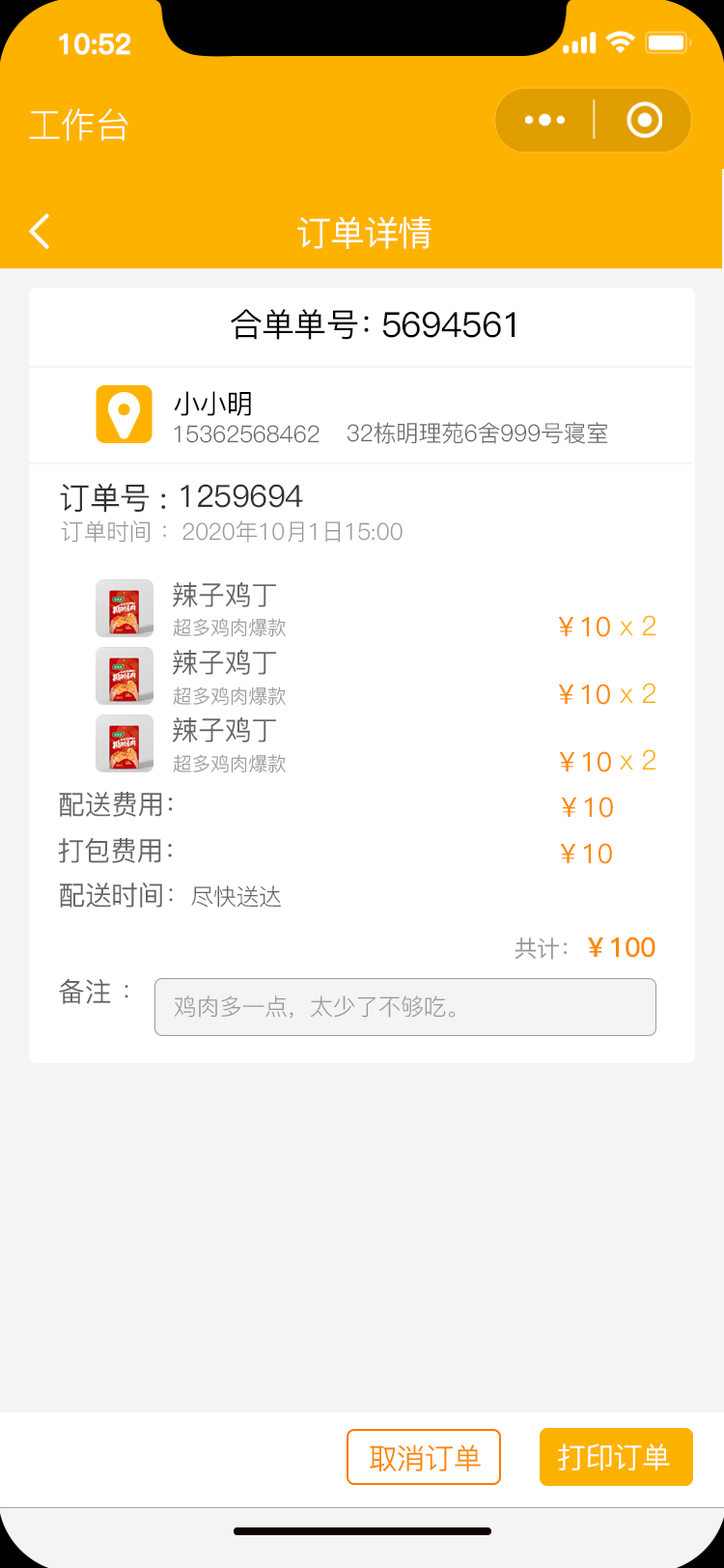
<style>
.page{position:relative;width:724px;height:1568px;background:#ffffff}
.page>*{position:absolute;margin:0}
.t1{font:27.5px "PingFang-SC-Bold";letter-spacing:-0.02em;color:#ffffff;font-weight:bold}
.t2{font:34.8px "PingFang-SC-Regular";letter-spacing:-0.02em;color:#ffffff}
.t3{font:34.8px "PingFang-SC-Medium";letter-spacing:-0.02em;color:#fefefe}
.t4{font:32.8px "PingFang-SC-Medium";letter-spacing:-0.02em;color:#000000}
.t5{font:34.8px "PingFang-SC-Medium";letter-spacing:-0.02em;color:#000000}
.t6{font:27px "PingFang-SC-Medium";letter-spacing:-0.02em;color:#000000}
.t7{font:23.2px "PingFang-SC-Regular";letter-spacing:-0.02em;color:#666666}
.t8{font:30.9px "PingFang-SC-Medium";letter-spacing:-0.02em;color:#333333}
.t9{font:23.2px "PingFang-SC-Regular";letter-spacing:-0.02em;color:#999999}
.t10{font:27px "PingFang-SC-Medium";letter-spacing:-0.02em;color:#666666}
.t11{font:19.3px "PingFang-SC-Regular";letter-spacing:-0.02em;color:#999999}
.t12{font:27px "PingFang-SC-Medium";letter-spacing:-0.02em;color:#fd8900}
.t13{font:27px "PingFang-SC-Regular";letter-spacing:-0.02em;color:#fdb100}
.t14{font:27px "PingFang-SC-Regular";letter-spacing:-0.02em;color:#666666}
.t15{font:27px "PingFang-SC-Bold";letter-spacing:-0.02em;color:#fd8900}
.t16{font:23.2px "PingFang-SC-Medium";letter-spacing:-0.02em;color:#999999}
.t17{font:29px "PingFang-SC-Medium";letter-spacing:-0.02em;color:#fd8900}
.t18{font:29px "PingFang-SC-Medium";letter-spacing:-0.02em;color:#ffffff}
</style>
<div class="page">
<p class="t1" style="left:59px;top:33px;width:71px;height:22px">10:52</p>
<p class="t2" style="left:29px;top:108px;width:99px;height:33px">工作台</p>
<p class="t3" style="left:297px;top:216px;width:135px;height:33px">订单详情</p>
<p class="t4" style="left:231px;top:309px;width:138px;height:31px">合单单号：</p>
<p class="t5" style="left:382px;top:311px;width:133px;height:27px">5694561</p>
<p class="t6" style="left:174px;top:391px;width:77px;height:25px">小小明</p>
<p class="t7" style="left:174px;top:425px;width:146px;height:18px">15362568462</p>
<p class="t7" style="left:347px;top:422px;width:261px;height:22px">32栋明理苑6舍999号寝室</p>
<p class="t8" style="left:60px;top:483px;width:106px;height:30px">订单号 :</p>
<p class="t8" style="left:181px;top:484px;width:122px;height:24px">1259694</p>
<p class="t9" style="left:61px;top:520px;width:342px;height:23px">订单时间 ：2020年10月1日15:00</p>
<p class="t10" style="left:173px;top:582px;width:103px;height:25px">辣子鸡丁</p>
<p class="t11" style="left:173px;top:618px;width:113px;height:19px">超多鸡肉爆款</p>
<p class="t12" style="left:558px;top:616px;width:52px;height:21px">￥10</p>
<p class="t13" style="left:620px;top:615px;width:37px;height:21px">x 2</p>
<p class="t10" style="left:173px;top:650px;width:103px;height:25px">辣子鸡丁</p>
<p class="t11" style="left:173px;top:686px;width:113px;height:20px">超多鸡肉爆款</p>
<p class="t12" style="left:558px;top:684px;width:52px;height:21px">￥10</p>
<p class="t13" style="left:620px;top:683px;width:37px;height:21px">x 2</p>
<p class="t10" style="left:173px;top:717px;width:103px;height:25px">辣子鸡丁</p>
<p class="t13" style="left:620px;top:749px;width:37px;height:21px">x 2</p>
<p class="t11" style="left:173px;top:754px;width:113px;height:19px">超多鸡肉爆款</p>
<p class="t12" style="left:559px;top:751px;width:52px;height:21px">￥10</p>
<p class="t10" style="left:59px;top:792px;width:114px;height:25px">配送费用：</p>
<p class="t12" style="left:561px;top:797px;width:52px;height:21px">￥10</p>
<p class="t10" style="left:58px;top:838px;width:114px;height:25px">打包费用：</p>
<p class="t12" style="left:560px;top:843px;width:52px;height:21px">￥10</p>
<p class="t10" style="left:60px;top:882px;width:221px;height:26px">配送时间<span class="t14">：</span><span class="t7">尽快送达</span></p>
<p class="t15" style="left:515px;top:937px;width:141px;height:23px"><span class="t16">共计：</span>￥100</p>
<p class="t10" style="left:59px;top:978px;width:69px;height:26px">备注 <span class="t14">：</span></p>
<p class="t9" style="left:174px;top:995px;width:282px;height:24px">鸡肉多一点，太少了不够吃。</p>
<p class="t17" style="left:370px;top:1444px;width:111px;height:27px">取消订单</p>
<p class="t18" style="left:558px;top:1443px;width:112px;height:27px">打印订单</p>
</div>
